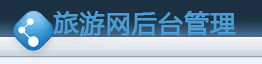
<style>
.page{position:relative;width:262px;height:64px}
.page>*{position:absolute;margin:0}
.t1{font:25px "MicrosoftYaHei";letter-spacing:0.02em;color:#4b9dd6;font-weight:bold}
</style>
<div class="page">
<p class="t1" style="left:53px;top:11px;width:183px;height:26px">旅游网后台管理</p>
</div>
